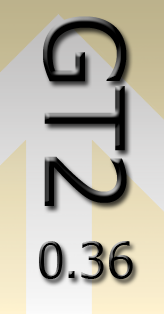
<style>
.page{position:relative;width:164px;height:314px}
.page>*{position:absolute;margin:0}
.t1{font:110px "Tahoma";color:#000000}
.t2{font:50px "Tahoma";color:#000000}
</style>
<div class="page">
<p class="t1" style="left:43px;top:16px;width:84px;height:190px;rotate:90deg">GT2</p>
<p class="t2" style="left:39px;top:241px;width:94px;height:38px">0.36</p>
</div>
